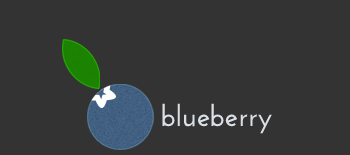
<style>
.page{position:relative;width:350px;height:155px;background:#333333}
.page>*{position:absolute;margin:0}
.t1{font:29.3px "JosefinSans-SemiBold";color:#dae0e6}
</style>
<div class="page">
<p class="t1" style="left:162px;top:103px;width:110px;height:31px">blueberry</p>
</div>
